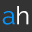
<style>
.page{position:relative;width:32px;height:32px;background:#333333}
.page>*{position:absolute;margin:0}
.t1{font:25px "Raleway-Regular";color:#0099ff}
.t2{font:25px "Raleway-Regular";color:#ffffff}
</style>
<div class="page">
<p class="t1" style="left:2px;top:6px;width:27px;height:19px">a<span class="t2">h</span></p>
</div>
